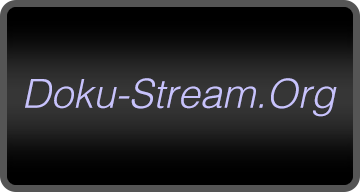
<style>
.page{position:relative;width:360px;height:192px}
.page>*{position:absolute;margin:0}
.t1{font:40px "Helvetica-LightOblique";color:#c8c3fc}
</style>
<div class="page">
<p class="t1" style="left:25px;top:78px;width:312px;height:39px">Doku-Stream.Org</p>
</div>
